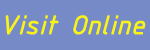
<style>
.page{position:relative;width:150px;height:50px;background:#768ac8}
.page>*{position:absolute;margin:0}
.t1{font:29.2px "ISOCPEURItalic";color:#faf318;font-weight:bold}
</style>
<div class="page">
<p class="t1" style="left:5px;top:15px;width:141px;height:20px">Visit Online</p>
</div>
